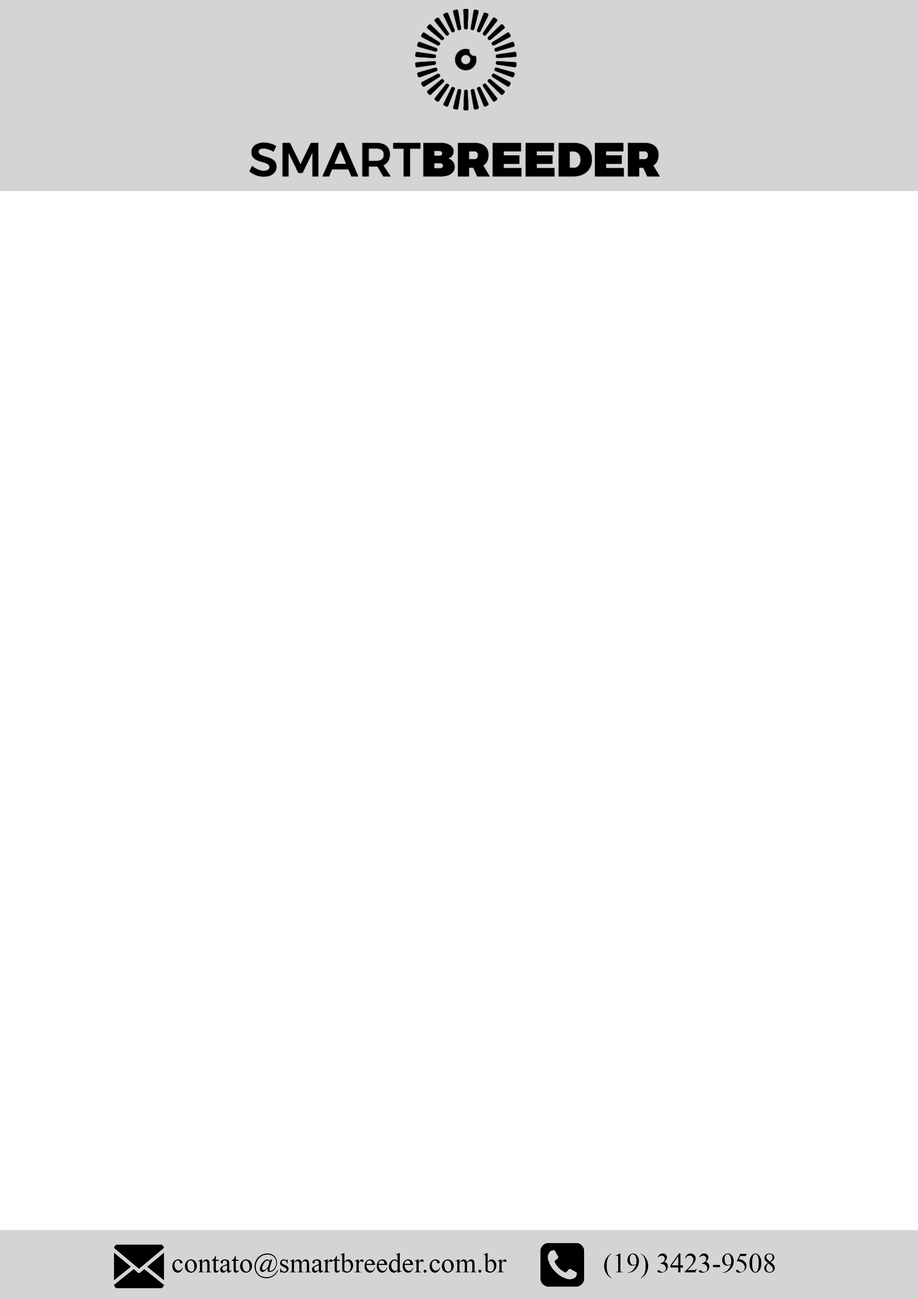
<style>
.page{position:relative;width:918px;height:1299px;background:#ffffff}
.page>*{position:absolute;margin:0}
.t1{font:41.4px "Microsoft-Himalaya";color:#000000}
</style>
<div class="page">
<p class="t1" style="left:172px;top:1253px;width:335px;height:25px">contato@smartbreeder.com.br</p>
<p class="t1" style="left:604px;top:1253px;width:171px;height:25px">(19) 3423-9508</p>
</div>
